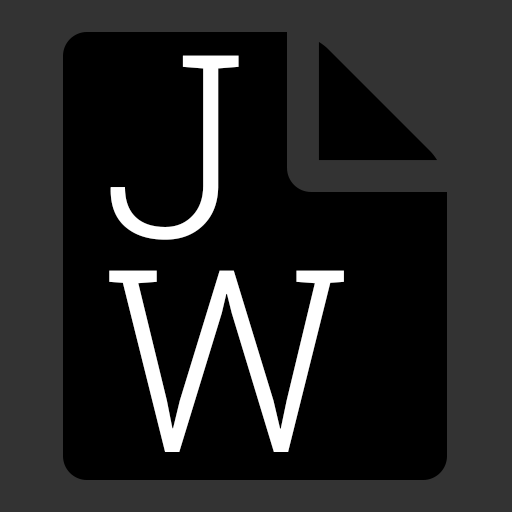
<style>
.page{position:relative;width:512px;height:512px;background:#000000}
.page>*{position:absolute;margin:0}
.t1{font:255px/215px "RobotoSlab-Light";color:#ffffff}
</style>
<div class="page">
<p class="t1" style="left:109px;top:55px;width:235px;height:397px">J<br>W</p>
</div>
